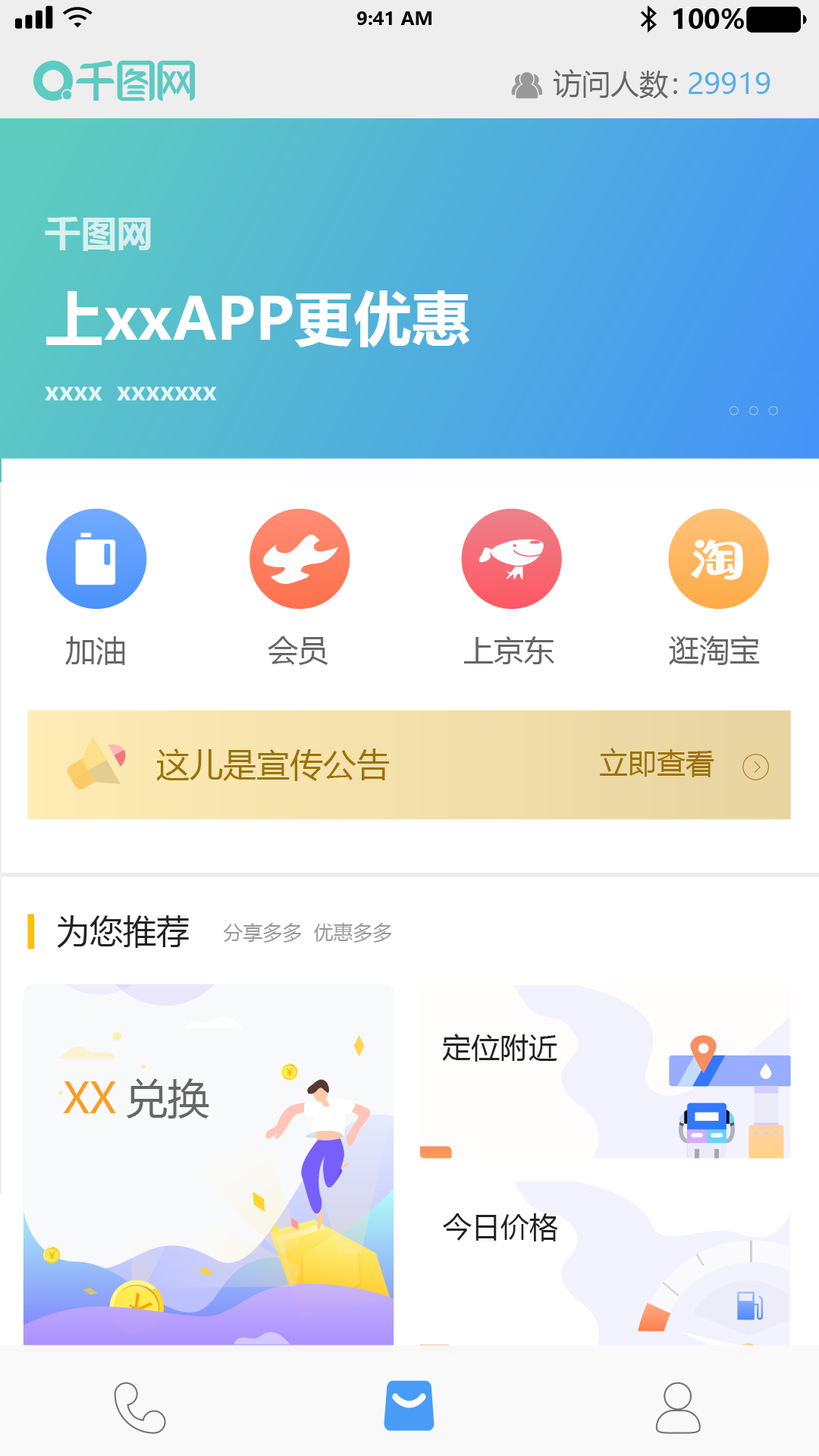
<style>
.page{position:relative;width:819px;height:1456px;background:#ffffff}
.page>*{position:absolute;margin:0}
.t1{font:18.2px "MicrosoftYaHei-Bold";color:#000000}
.t2{font:26.5px "MicrosoftYaHei-Bold";color:#000000}
.t3{font:28.8px "MicrosoftYaHei";color:#666666}
.t4{font:28.8px "MicrosoftYaHei";color:#58afe8}
.t5{font:35.6px "MicrosoftYaHei-Bold";letter-spacing:0.004em;color:#d6efef}
.t6{font:58.5px "MicrosoftYaHei-Bold";letter-spacing:0.004em;color:#ffffff}
.t7{font:24.3px "MicrosoftYaHei-Bold";letter-spacing:0.004em;color:#e4f3f6}
.t8{font:30.3px "MicrosoftYaHei";color:#666666}
.t9{font:33.4px "MicrosoftYaHei";color:#9b7300}
.t10{font:28.8px "MicrosoftYaHei";color:#9b7300}
.t11{font:33.4px "MicrosoftYaHei";color:#222222}
.t12{font:19.7px "MicrosoftYaHei";color:#999999}
.t13{font:28.8px "MicrosoftYaHei";color:#222222}
.t14{font:41.7px "MicrosoftYaHei";color:#fe9c1d}
.t15{font:41.7px "MicrosoftYaHei";color:#666666}
</style>
<div class="page">
<p class="t1" style="left:357px;top:11px;width:74px;height:14px">9:41 AM</p>
<p class="t2" style="left:673px;top:8px;width:71px;height:21px">100%</p>
<p class="t3" style="left:553px;top:69px;width:124px;height:30px">访问人数：</p>
<p class="t4" style="left:689px;top:72px;width:81px;height:22px">29919</p>
<p class="t5" style="left:45px;top:217px;width:106px;height:34px">千图网</p>
<p class="t6" style="left:46px;top:290px;width:423px;height:57px">上xxAPP更优惠</p>
<p class="t7" style="left:45px;top:387px;width:172px;height:13px">xxxx  xxxxxxx</p>
<p class="t8" style="left:65px;top:636px;width:60px;height:29px">加油</p>
<p class="t8" style="left:268px;top:636px;width:60px;height:29px">会员</p>
<p class="t8" style="left:464px;top:636px;width:90px;height:28px">上京东</p>
<p class="t8" style="left:669px;top:635px;width:91px;height:30px">逛淘宝</p>
<p class="t9" style="left:156px;top:748px;width:234px;height:33px">这儿是宣传公告</p>
<p class="t10" style="left:600px;top:748px;width:114px;height:29px">立即查看</p>
<p class="t11" style="left:57px;top:915px;width:132px;height:33px">为您推荐</p>
<p class="t12" style="left:223px;top:923px;width:168px;height:20px">分享多多  优惠多多</p>
<p class="t13" style="left:442px;top:1034px;width:115px;height:28px">定位附近</p>
<p class="t14" style="left:63px;top:1081px;width:53px;height:32px">XX</p>
<p class="t15" style="left:127px;top:1078px;width:82px;height:41px">兑换</p>
<p class="t13" style="left:443px;top:1213px;width:115px;height:28px">今日价格</p>
</div>
